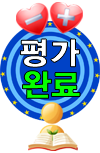
<style>
.page{position:relative;width:100px;height:153px;background:#ffffff}
.page>*{position:absolute;margin:0}
.t1{font:31px "YDIYGO350";color:#ffffff;font-weight:bold}
.t2{font:31px "YDIYGO350";color:#06ff00;font-weight:bold}
</style>
<div class="page">
<p class="t1" style="left:20px;top:39px;width:27px;height:29px">평</p>
<p class="t1" style="left:50px;top:39px;width:30px;height:28px">가</p>
<p class="t2" style="left:22px;top:70px;width:30px;height:29px">완</p>
<p class="t2" style="left:51px;top:72px;width:29px;height:25px">료</p>
</div>
